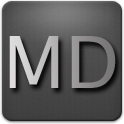
<style>
.page{position:relative;width:124px;height:124px}
.page>*{position:absolute;margin:0}
.t1{font:72px "LucidaSansUnicode"}
</style>
<div class="page">
<p class="t1" style="left:9px;top:36px;width:107px;height:52px">MD</p>
</div>
